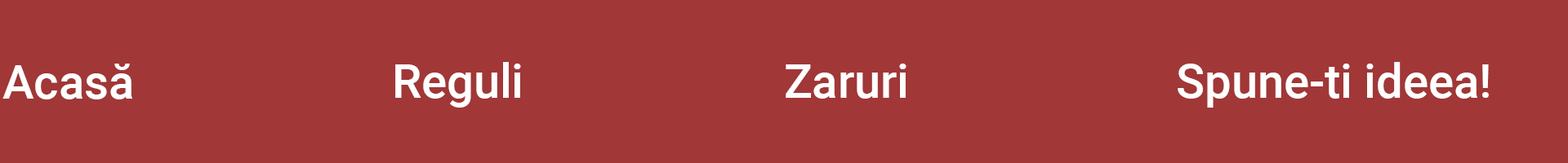
<style>
.page{position:relative;width:1568px;height:163px;background:#a13737}
.page>*{position:absolute;margin:0}
.t1{font:47.2px "Roboto-Medium";color:#ffffff}
</style>
<div class="page">
<p class="t1" style="left:2px;top:64px;width:130px;height:36px">Acasă</p>
<p class="t1" style="left:395px;top:62px;width:126px;height:46px">Reguli</p>
<p class="t1" style="left:786px;top:64px;width:120px;height:35px">Zaruri</p>
<p class="t1" style="left:1178px;top:62px;width:311px;height:46px">Spune-ti ideea!</p>
</div>
